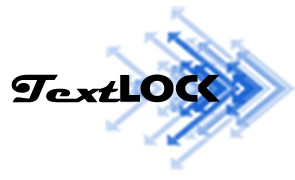
<style>
.page{position:relative;width:295px;height:180px;background:#ffffff}
.page>*{position:absolute;margin:0}
.t1{font:67.9px "Magneto-Bold";color:#000000;scale:1.21 1}
.t2{font:67.9px "StopD";color:#000000;scale:1.21 1}
</style>
<div class="page">
<p class="t1" style="left:11px;top:74px;width:110px;height:29px">Text</p>
<p class="t2" style="left:120px;top:74px;width:100px;height:29px">Lock</p>
</div>
